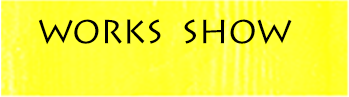
<style>
.page{position:relative;width:349px;height:97px}
.page>*{position:absolute;margin:0}
.t1{font:33.3px "LithosPro-Regular";letter-spacing:-0.02em;color:#000000}
</style>
<div class="page">
<p class="t1" style="left:38px;top:19px;width:254px;height:26px">WORKS  SHOW</p>
</div>
